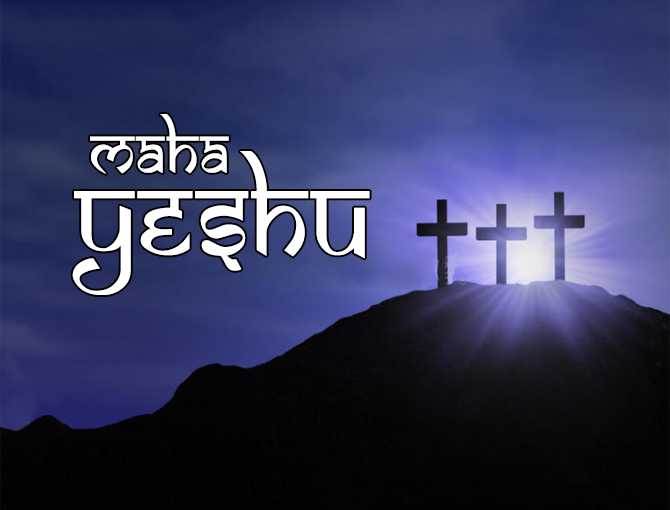
<style>
.page{position:relative;width:670px;height:510px}
.page>*{position:absolute;margin:0}
.t1{font:51px "SamarkanNormal";letter-spacing:0.04em;color:#ffffff;scale:0.87 1}
.t2{font:90.7px "SamarkanNormal";letter-spacing:0.04em;color:#ffffff;scale:0.87 1}
</style>
<div class="page">
<p class="t1" style="left:90px;top:114px;width:139px;height:60px">Maha</p>
<p class="t2" style="left:72px;top:151px;width:298px;height:144px">yeshu</p>
</div>
